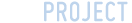
<style>
.page{position:relative;width:132px;height:23px;background:#ffffff}
.page>*{position:absolute;margin:0}
.t1{font:30px "Miso";color:#bed4ec;text-transform:uppercase;font-weight:bold}
.t2{font:30px "Miso";color:#ffffff;text-transform:uppercase;font-weight:bold}
</style>
<div class="page">
<p class="t1" style="left:4px;top:1px;width:124px;height:21px"><span class="t2">doc</span>project</p>
</div>
